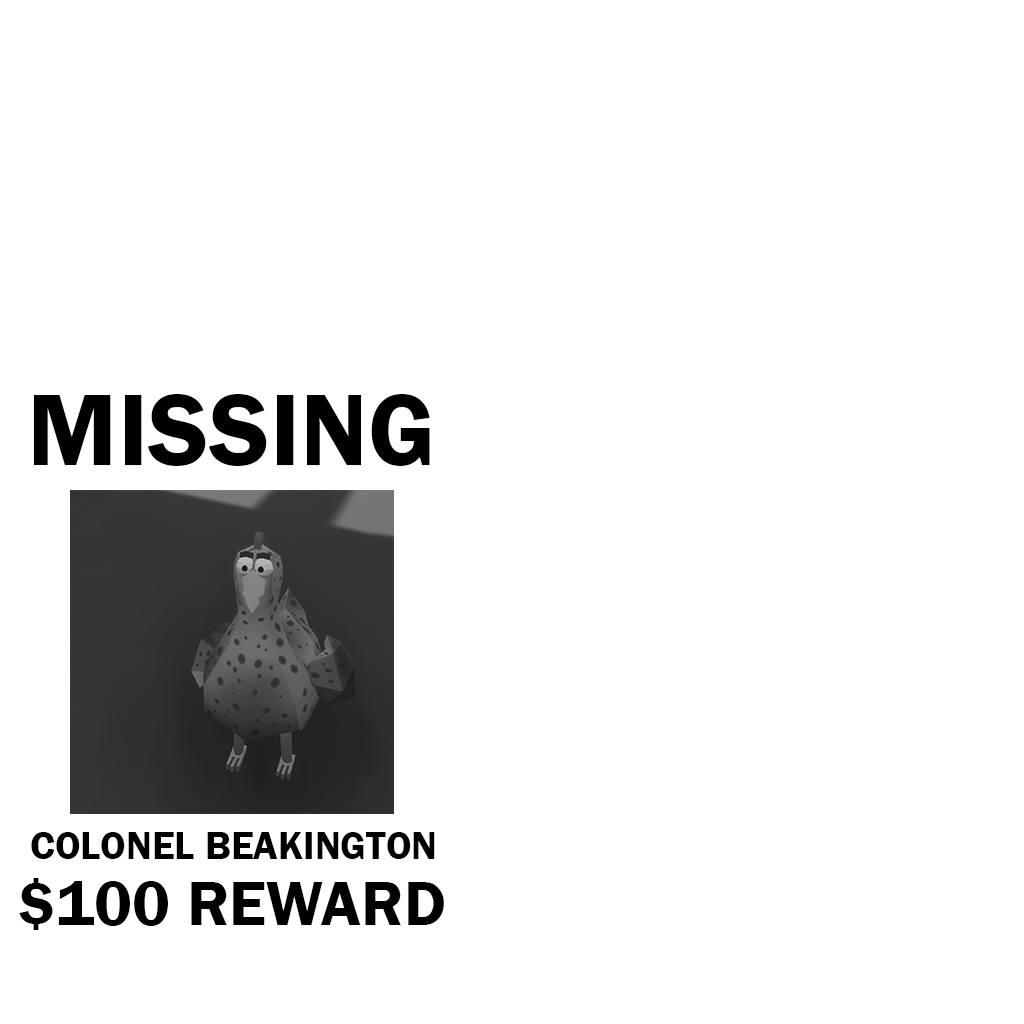
<style>
.page{position:relative;width:1024px;height:1024px;background:#ffffff}
.page>*{position:absolute;margin:0}
.t1{font:105px "FranklinGothic-Demi";color:#000000}
.t2{font:40px "FranklinGothic-Demi";color:#000000}
.t3{font:65px "FranklinGothic-Demi";color:#000000}
</style>
<div class="page">
<p class="t1" style="left:33px;top:394px;width:397px;height:72px">MISSING</p>
<p class="t2" style="left:31px;top:832px;width:404px;height:27px">COLONEL BEAKINGTON</p>
<p class="t3" style="left:19px;top:878px;width:425px;height:52px">$100 REWARD</p>
</div>
